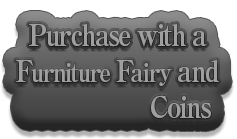
<style>
.page{position:relative;width:237px;height:139px}
.page>*{position:absolute;margin:0}
.t1{font:30px/38px "RyuminPro-ExBold";letter-spacing:-0.08em;color:#9f9f9f;scale:0.9 1}
.t2{font:26px/38px "RyuminPro-ExBold";letter-spacing:-0.08em;color:#9f9f9f;scale:0.9 1}
</style>
<div class="page">
<p class="t1" style="left:16px;top:24px;width:203px;height:95px;text-align:center">Purchase with a<br>F<span class="t2">urniture</span> F<span class="t2">airy</span> and<br>                   Coins</p>
</div>
